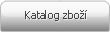
<style>
.page{position:relative;width:110px;height:32px}
.page>*{position:absolute;margin:0}
.t1{font:11px "Tahoma";color:#464646}
</style>
<div class="page">
<p class="t1" style="left:25px;top:10px;width:62px;height:11px">Katalog zboží</p>
</div>
